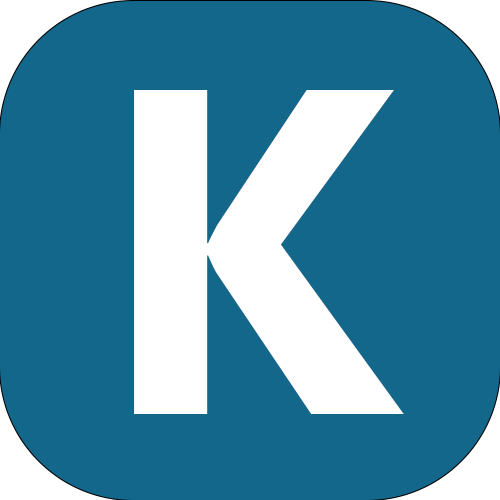
<style>
.page{position:relative;width:500px;height:500px;background:#13678a}
.page>*{position:absolute;margin:0}
.t1{font:463px "SegoeUI-Bold";color:#ffffff}
</style>
<div class="page">
<p class="t1" style="left:134px;top:90px;width:270px;height:324px">K</p>
</div>
